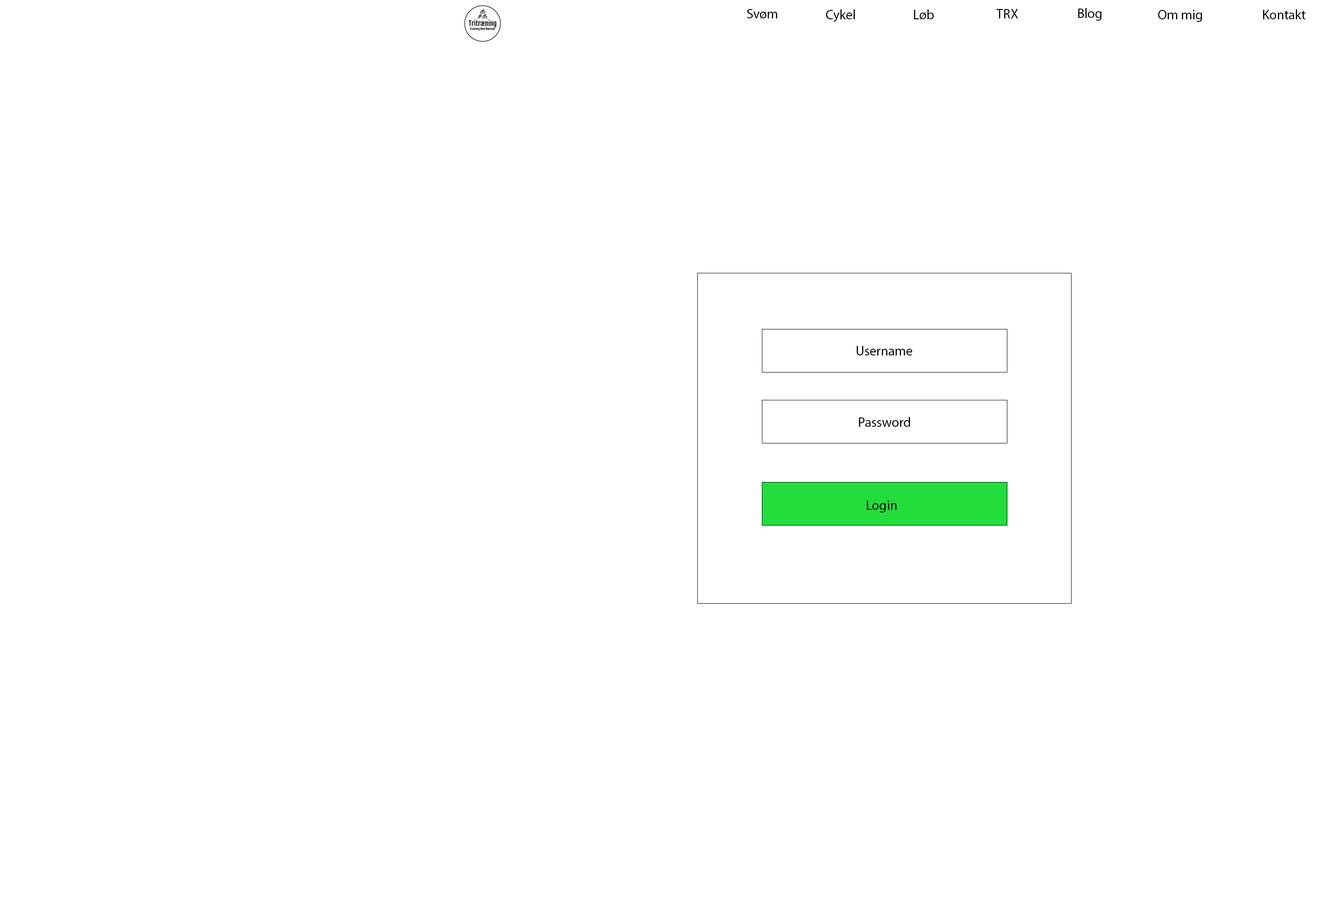
<style>
.page{position:relative;width:1321px;height:903px;background:#ffffff}
.page>*{position:absolute;margin:0}
.t1{font:13.5px "MyriadPro-Regular";color:#000000}
</style>
<div class="page">
<p class="t1" style="left:747px;top:9px;width:30px;height:10px">Svøm</p>
<p class="t1" style="left:826px;top:9px;width:29px;height:13px">Cykel</p>
<p class="t1" style="left:914px;top:9px;width:20px;height:11px">Løb</p>
<p class="t1" style="left:996px;top:9px;width:22px;height:9px">TRX</p>
<p class="t1" style="left:1078px;top:8px;width:24px;height:13px">Blog</p>
<p class="t1" style="left:1158px;top:10px;width:44px;height:12px">Om mig</p>
<p class="t1" style="left:1263px;top:9px;width:43px;height:10px">Kontakt</p>
<p class="t1" style="left:857px;top:346px;width:55px;height:9px">Username</p>
<p class="t1" style="left:859px;top:417px;width:51px;height:10px">Password</p>
<p class="t1" style="left:867px;top:500px;width:29px;height:12px">Login</p>
</div>
